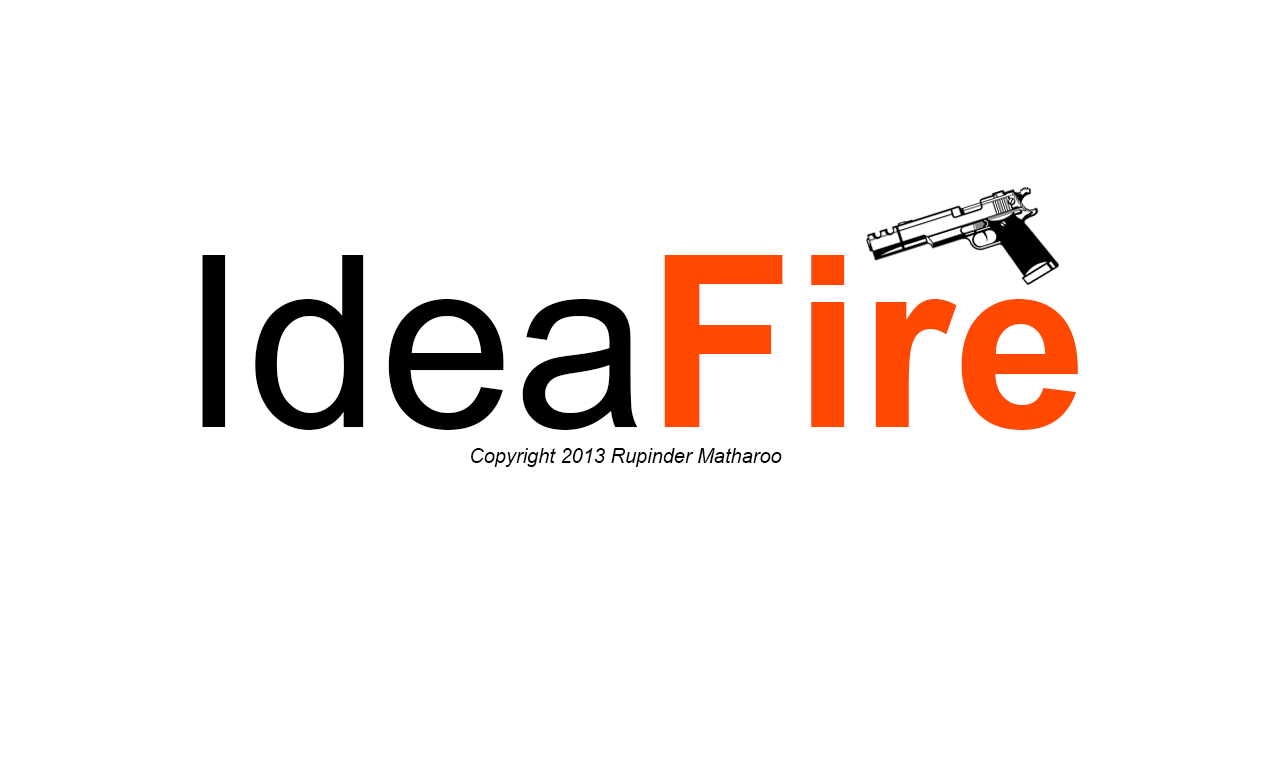
<style>
.page{position:relative;width:1280px;height:768px;background:#ffffff}
.page>*{position:absolute;margin:0}
.t1{font:240px "ArialMT";color:#000000}
.t2{font:240px "Arial-BoldMT";color:#ff4800}
.t3{font:20px "Arial-ItalicMT";color:#000000}
</style>
<div class="page">
<p class="t1" style="left:202px;top:255px;width:876px;height:175px">Idea<span class="t2">Fire</span></p>
<p class="t3" style="left:471px;top:448px;width:311px;height:19px">Copyright 2013 Rupinder Matharoo</p>
</div>
